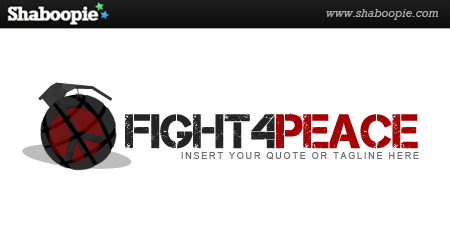
<style>
.page{position:relative;width:450px;height:250px;background:#ffffff}
.page>*{position:absolute;margin:0}
.t1{font:48px "Captureit";letter-spacing:-0.005em;color:#242424}
.t2{font:48px "Captureit";letter-spacing:-0.005em;color:#a60000}
.t3{font:9px "ArialMT";letter-spacing:0.2em;color:#6a6a6a}
</style>
<div class="page">
<p class="t1" style="left:125px;top:113px;width:293px;height:36px">fight4<span class="t2">peace</span></p>
<p class="t3" style="left:181px;top:152px;width:238px;height:8px">INSERT YOUR QUOTE OR TAGLINE HERE</p>
</div>
